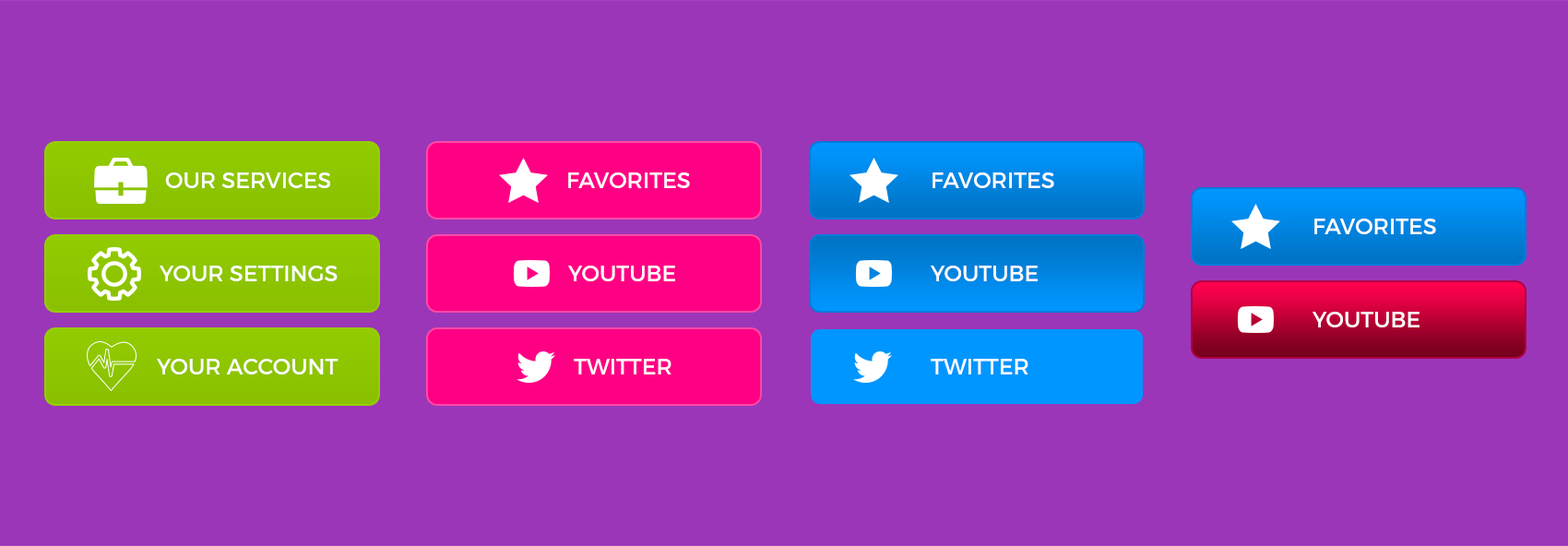
<style>
.page{position:relative;width:1568px;height:546px;background:#9b36b8}
.page>*{position:absolute;margin:0}
.t1{font:22.1px "Montserrat-Regular";color:#ffffff;text-transform:uppercase}
</style>
<div class="page">
<p class="t1" style="left:165px;top:172px;width:165px;height:16px">Our Services</p>
<p class="t1" style="left:568px;top:172px;width:122px;height:16px">Favorites</p>
<p class="t1" style="left:932px;top:172px;width:122px;height:16px">Favorites</p>
<p class="t1" style="left:1314px;top:219px;width:122px;height:15px">Favorites</p>
<p class="t1" style="left:160px;top:266px;width:178px;height:15px">Your Settings</p>
<p class="t1" style="left:568px;top:266px;width:107px;height:15px">Youtube</p>
<p class="t1" style="left:931px;top:266px;width:107px;height:15px">Youtube</p>
<p class="t1" style="left:1313px;top:312px;width:107px;height:15px">Youtube</p>
<p class="t1" style="left:157px;top:359px;width:182px;height:15px">Your Account</p>
<p class="t1" style="left:574px;top:359px;width:97px;height:15px">Twitter</p>
<p class="t1" style="left:931px;top:359px;width:97px;height:15px">Twitter</p>
</div>
